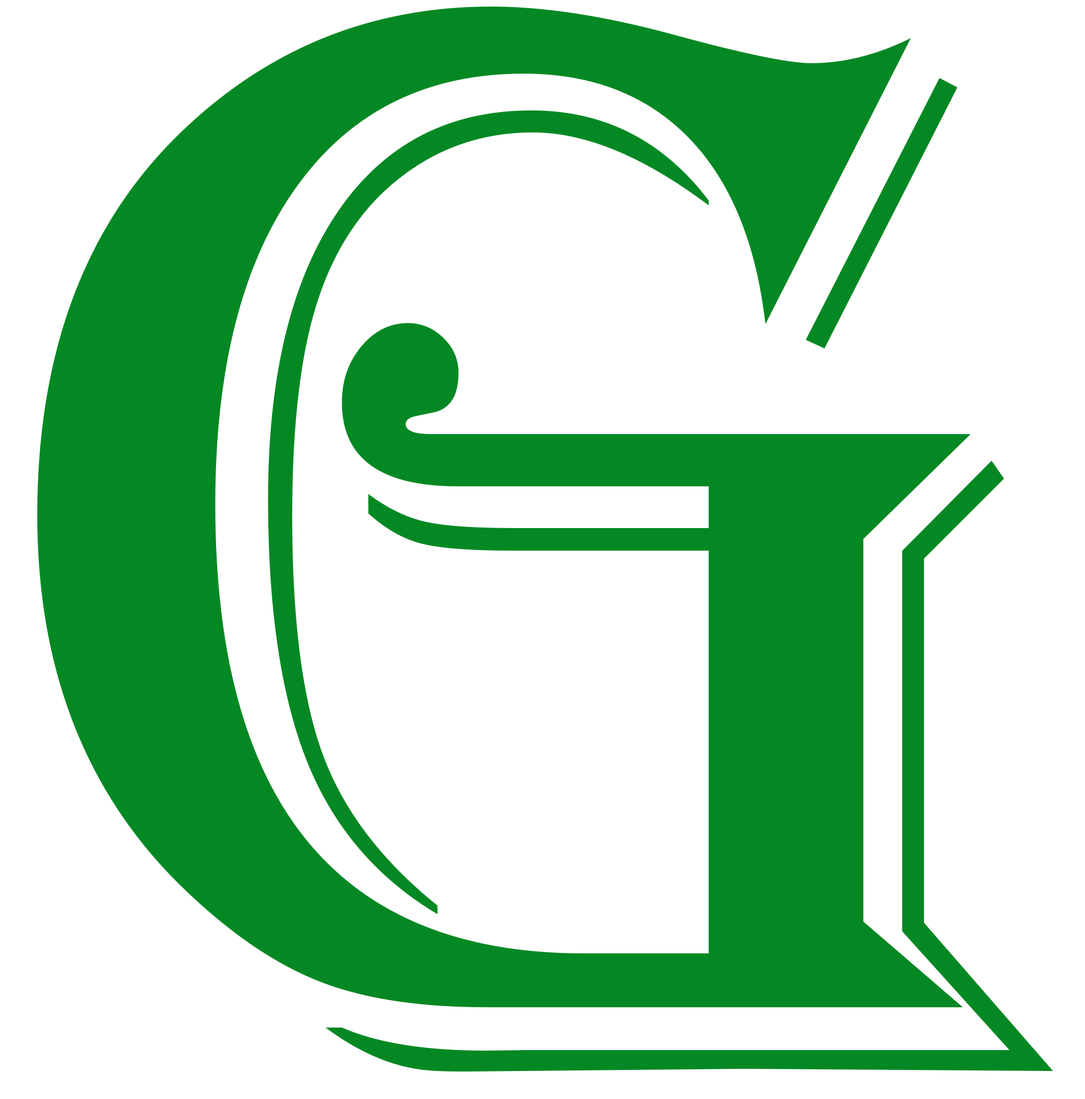
<style>
.page{position:relative;width:1085px;height:1099px;background:#ffffff}
.page>*{position:absolute;margin:0}
.t1{font:1591px "Algerian";color:#048823}
</style>
<div class="page">
<p class="t1" style="left:37px;top:7px;width:1016px;height:1065px">G</p>
</div>
